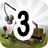
<style>
.page{position:relative;width:48px;height:48px}
.page>*{position:absolute;margin:0}
.t1{font:34.4px "ArialRoundedMTBold";letter-spacing:0.12em;color:#000000;font-weight:bold;scale:0.67 1}
</style>
<div class="page">
<p class="t1" style="left:17px;top:10px;width:13px;height:27px">3</p>
</div>
